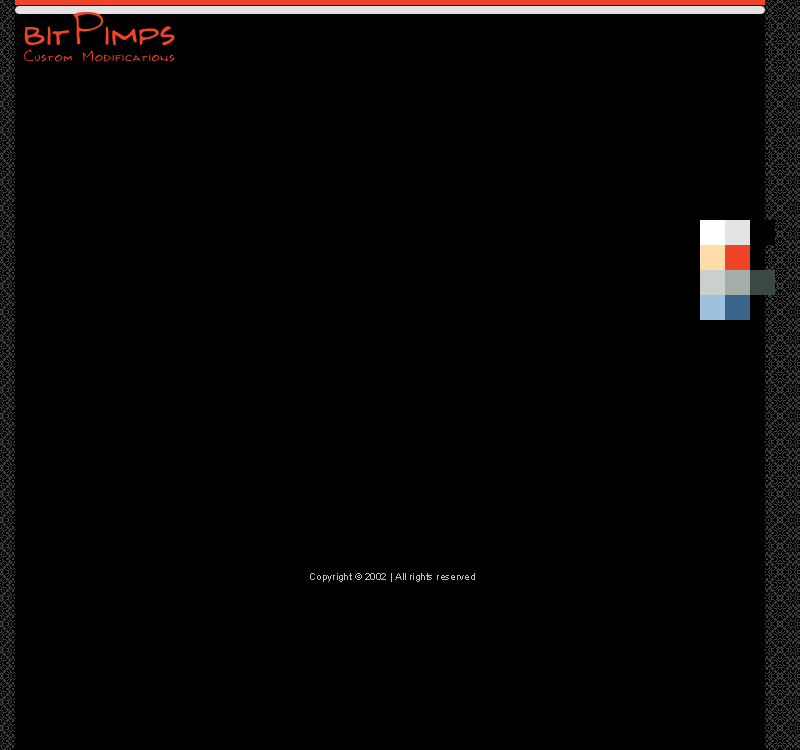
<style>
.page{position:relative;width:800px;height:750px;background:#000000}
.page>*{position:absolute;margin:0}
.t1{font:48px "Kilroy-WasHere";color:#ef4427}
.t2{font:16px "Kilroy-WasHere";letter-spacing:0.055em;color:#ef4427}
.t3{font:10px "ArialMT";color:#b6c4bd}
</style>
<div class="page">
<p class="t1" style="left:24px;top:12px;width:151px;height:34px">bitPimps</p>
<p class="t2" style="left:24px;top:49px;width:151px;height:13px">Custom Modifications</p>
<p class="t3" style="left:310px;top:573px;width:165px;height:9px">Copyright © 2002 | All rights reserved</p>
</div>
